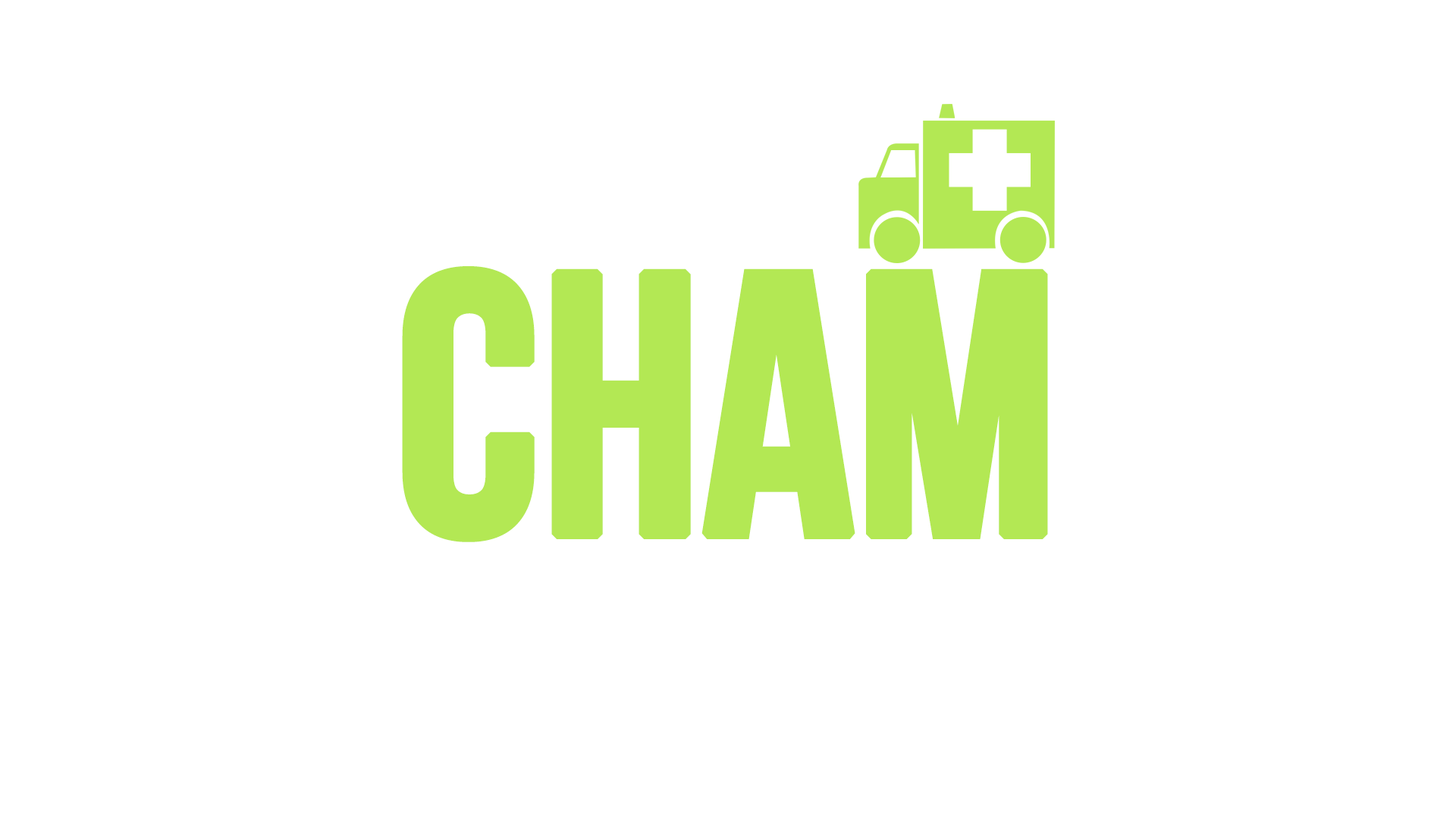
<style>
.page{position:relative;width:1456px;height:819px;background:#ffffff}
.page>*{position:absolute;margin:0}
.t1{font:371.2px "BebasNeueBold";letter-spacing:-0.02em;color:#b3e854;font-weight:bold}
</style>
<div class="page">
<p class="t1" style="left:402px;top:266px;width:646px;height:276px">CHAM</p>
</div>
